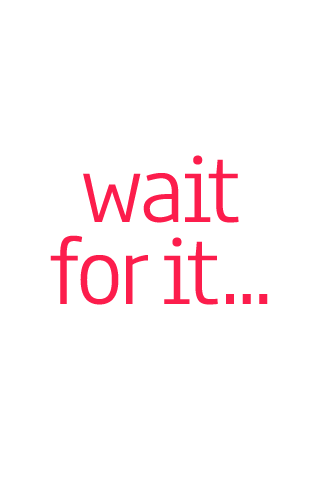
<style>
.page{position:relative;width:320px;height:480px;background:#ffffff}
.page>*{position:absolute;margin:0}
.t1{font:100px/82px "Anaheim-Regular";letter-spacing:-0.025em;color:#fc1d4c}
.t2{font:100px/64px "Anaheim-Regular";letter-spacing:-0.025em;color:#fc1d4c}
</style>
<div class="page">
<p class="t1" style="left:50px;top:155px;width:218px;height:150px;text-align:center">wait<br>for it<span class="t2">...</span></p>
</div>
